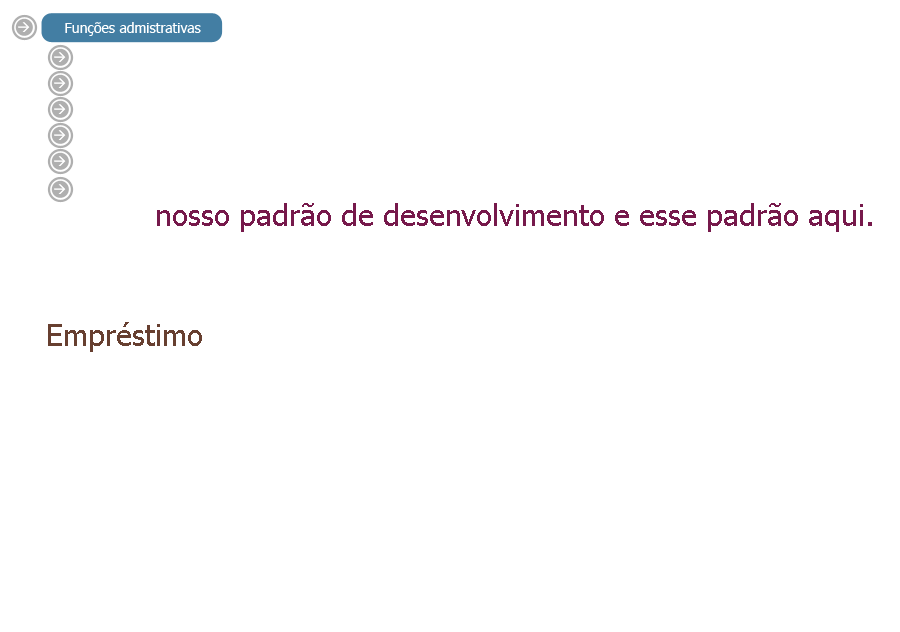
<style>
.page{position:relative;width:900px;height:632px;background:#ffffff}
.page>*{position:absolute;margin:0}
.t1{font:14px "Tahoma";color:#ffffff}
.t2{font:29.5px "Tahoma";color:#76194b}
</style>
<div class="page">
<p class="t1" style="left:65px;top:22px;width:136px;height:14px">Funções admistrativas</p>
<p class="t2" style="left:157px;top:203px;width:715px;height:29px">nosso padrão de desenvolvimento e esse padrão aqui.</p>
</div>
